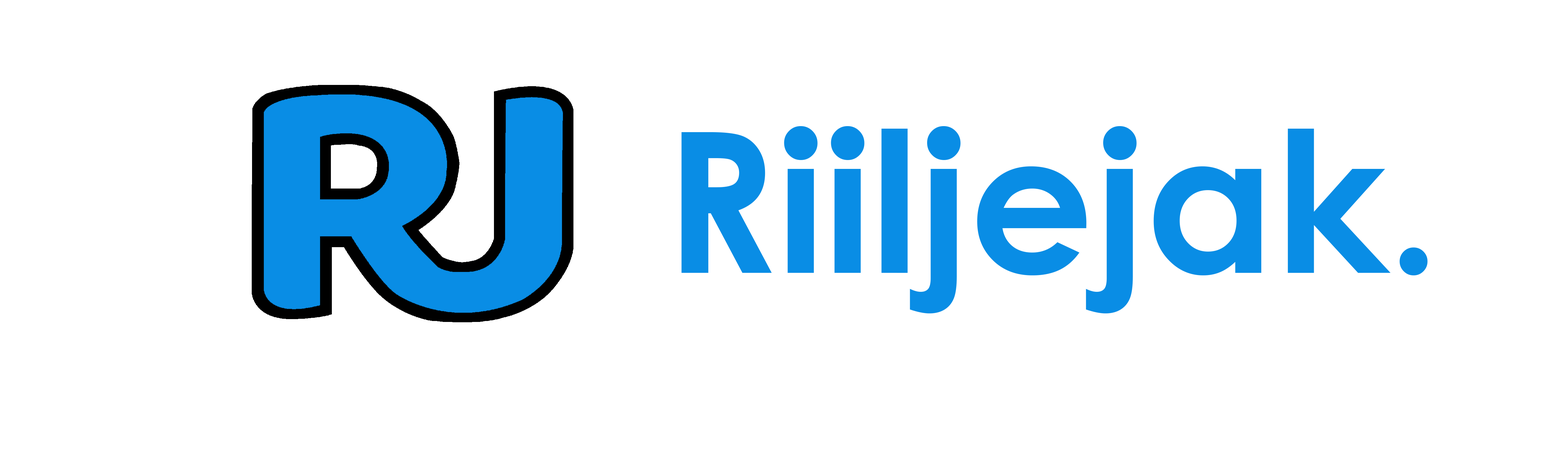
<style>
.page{position:relative;width:1568px;height:462px;background:#ffffff}
.page>*{position:absolute;margin:0}
.t1{font:195.8px "CenturyGothic-Bold";color:#098de5}
.t2{font:181.3px "CenturyGothic-Bold";color:#098de5}
.t3{font:128.5px "CenturyGothic-Bold";color:#ffffff}
</style>
<div class="page">
<p class="t1" style="left:681px;top:126px;width:865px;height:187px">Riiljejak<span class="t2">.</span><span class="t3">id</span></p>
</div>
